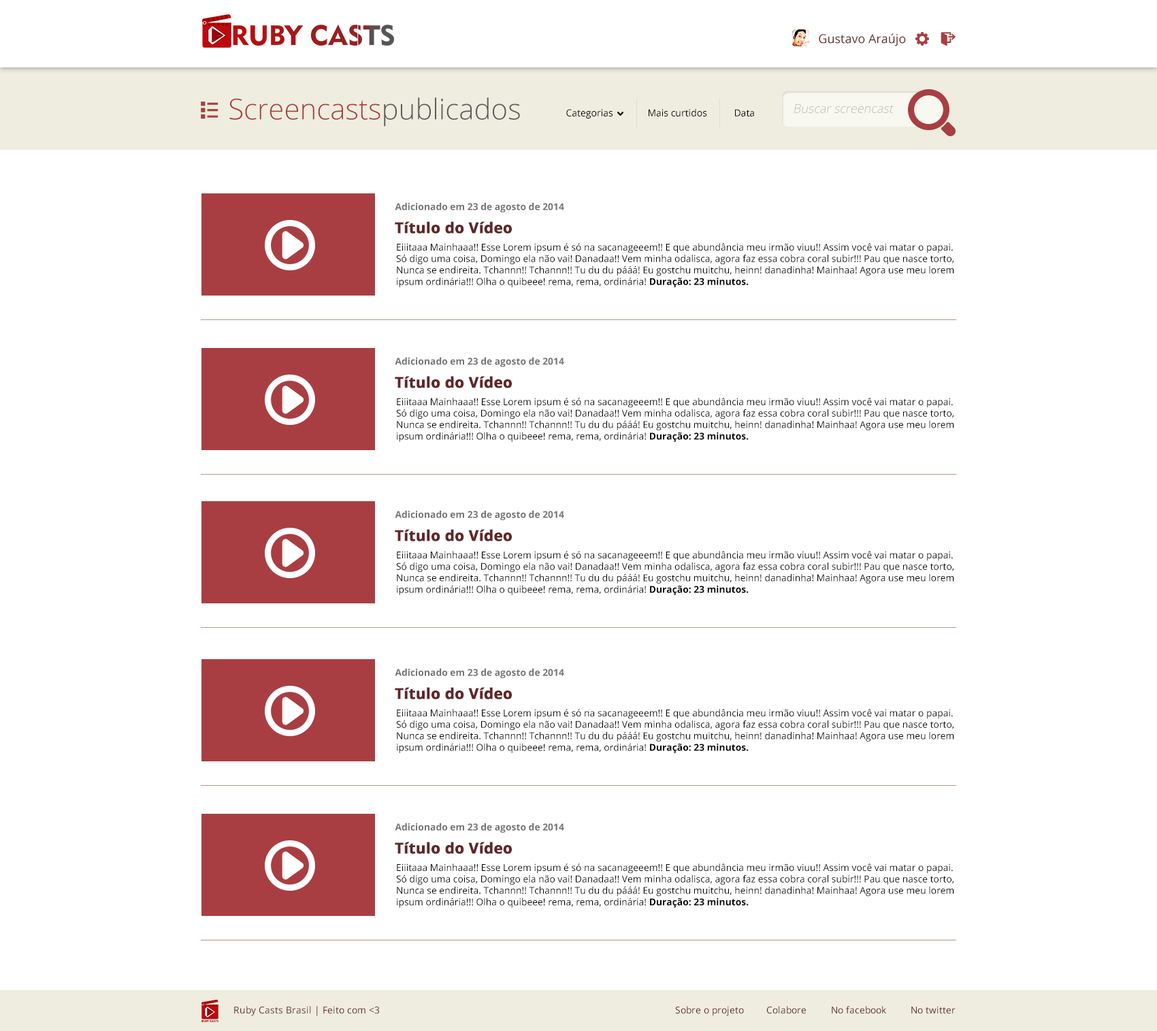
<style>
.page{position:relative;width:1157px;height:1031px;background:#ffffff}
.page>*{position:absolute;margin:0}
.t1{font:12.3px "OpenSans";color:#602728}
.t2{font:28.6px "OpenSans-Light";color:#a93e42}
.t3{font:28.6px "OpenSans-Light";color:#5b5a5a}
.t4{font:9.5px "OpenSans";color:#000000}
.t5{font:12.3px "OpenSans-Light";color:#bbbab2;font-style:italic}
.t6{font:9.5px "OpenSans-Bold";color:#747474}
.t7{font:15px "OpenSans-Bold";color:#602728;font-weight:bold}
.t8{font:9.5px "OpenSans-Bold";color:#000000}
.t9{font:9.5px "OpenSans";color:#602728}
</style>
<div class="page">
<p class="t1" style="left:819px;top:33px;width:87px;height:13px">Gustavo Araújo</p>
<p class="t2" style="left:229px;top:97px;width:291px;height:30px">Screencasts<span class="t3">publicados</span></p>
<p class="t4" style="left:566px;top:109px;width:47px;height:9px">Categorias</p>
<p class="t4" style="left:649px;top:109px;width:58px;height:7px">Mais curtidos</p>
<p class="t4" style="left:735px;top:109px;width:19px;height:7px">Data</p>
<p class="t5" style="left:794px;top:104px;width:100px;height:9px">Buscar screencast</p>
<p class="t6" style="left:395px;top:202px;width:169px;height:10px">Adicionado em 23 de agosto de 2014</p>
<p class="t7" style="left:395px;top:221px;width:117px;height:12px">Título do Vídeo</p>
<p class="t4" style="left:396px;top:243px;width:558px;height:44px;text-align:right">Eiiitaaa Mainhaaa!! Esse Lorem ipsum é só na sacanageeem!! E que abundância meu irmão viuu!! Assim você vai matar o papai. Só digo uma coisa, Domingo ela não vai! Danadaa!! Vem minha odalisca, agora faz essa cobra coral subir!!! Pau que nasce torto, Nunca se endireita. Tchannn!! Tchannn!! Tu du du pááá! Eu gostchu muitchu, heinn! danadinha! Mainhaa! Agora use meu lorem ipsum ordinária!!! Olha o quibeee! rema, rema, ordinária! <span class="t8">Duração: 23 minutos.</span></p>
<p class="t6" style="left:395px;top:357px;width:169px;height:10px">Adicionado em 23 de agosto de 2014</p>
<p class="t7" style="left:395px;top:376px;width:117px;height:12px">Título do Vídeo</p>
<p class="t4" style="left:396px;top:398px;width:558px;height:44px;text-align:right">Eiiitaaa Mainhaaa!! Esse Lorem ipsum é só na sacanageeem!! E que abundância meu irmão viuu!! Assim você vai matar o papai. Só digo uma coisa, Domingo ela não vai! Danadaa!! Vem minha odalisca, agora faz essa cobra coral subir!!! Pau que nasce torto, Nunca se endireita. Tchannn!! Tchannn!! Tu du du pááá! Eu gostchu muitchu, heinn! danadinha! Mainhaa! Agora use meu lorem ipsum ordinária!!! Olha o quibeee! rema, rema, ordinária! <span class="t8">Duração: 23 minutos.</span></p>
<p class="t6" style="left:395px;top:510px;width:169px;height:10px">Adicionado em 23 de agosto de 2014</p>
<p class="t7" style="left:395px;top:529px;width:117px;height:12px">Título do Vídeo</p>
<p class="t4" style="left:396px;top:551px;width:558px;height:44px;text-align:right">Eiiitaaa Mainhaaa!! Esse Lorem ipsum é só na sacanageeem!! E que abundância meu irmão viuu!! Assim você vai matar o papai. Só digo uma coisa, Domingo ela não vai! Danadaa!! Vem minha odalisca, agora faz essa cobra coral subir!!! Pau que nasce torto, Nunca se endireita. Tchannn!! Tchannn!! Tu du du pááá! Eu gostchu muitchu, heinn! danadinha! Mainhaa! Agora use meu lorem ipsum ordinária!!! Olha o quibeee! rema, rema, ordinária! <span class="t8">Duração: 23 minutos.</span></p>
<p class="t6" style="left:395px;top:668px;width:169px;height:10px">Adicionado em 23 de agosto de 2014</p>
<p class="t7" style="left:395px;top:687px;width:117px;height:12px">Título do Vídeo</p>
<p class="t4" style="left:396px;top:709px;width:558px;height:44px;text-align:right">Eiiitaaa Mainhaaa!! Esse Lorem ipsum é só na sacanageeem!! E que abundância meu irmão viuu!! Assim você vai matar o papai. Só digo uma coisa, Domingo ela não vai! Danadaa!! Vem minha odalisca, agora faz essa cobra coral subir!!! Pau que nasce torto, Nunca se endireita. Tchannn!! Tchannn!! Tu du du pááá! Eu gostchu muitchu, heinn! danadinha! Mainhaa! Agora use meu lorem ipsum ordinária!!! Olha o quibeee! rema, rema, ordinária! <span class="t8">Duração: 23 minutos.</span></p>
<p class="t6" style="left:395px;top:822px;width:169px;height:10px">Adicionado em 23 de agosto de 2014</p>
<p class="t7" style="left:395px;top:841px;width:117px;height:13px">Título do Vídeo</p>
<p class="t4" style="left:396px;top:863px;width:558px;height:44px;text-align:right">Eiiitaaa Mainhaaa!! Esse Lorem ipsum é só na sacanageeem!! E que abundância meu irmão viuu!! Assim você vai matar o papai. Só digo uma coisa, Domingo ela não vai! Danadaa!! Vem minha odalisca, agora faz essa cobra coral subir!!! Pau que nasce torto, Nunca se endireita. Tchannn!! Tchannn!! Tu du du pááá! Eu gostchu muitchu, heinn! danadinha! Mainhaa! Agora use meu lorem ipsum ordinária!!! Olha o quibeee! rema, rema, ordinária! <span class="t8">Duração: 23 minutos.</span></p>
<p class="t9" style="left:234px;top:1005px;width:145px;height:11px">Ruby Casts Brasil | Feito com &lt;3</p>
<p class="t9" style="left:675px;top:1005px;width:69px;height:11px">Sobre o projeto</p>
<p class="t9" style="left:766px;top:1005px;width:40px;height:9px">Colabore</p>
<p class="t9" style="left:832px;top:1005px;width:54px;height:9px">No facebook</p>
<p class="t9" style="left:911px;top:1006px;width:45px;height:8px">No twitter</p>
</div>
